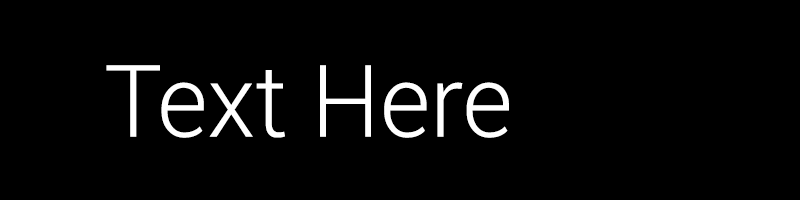
<style>
.page{position:relative;width:800px;height:200px;background:#000000}
.page>*{position:absolute;margin:0}
.t1{font:100px "Roboto-Light";color:#ffffff}
</style>
<div class="page">
<p class="t1" style="left:106px;top:65px;width:403px;height:73px">Text Here</p>
</div>
